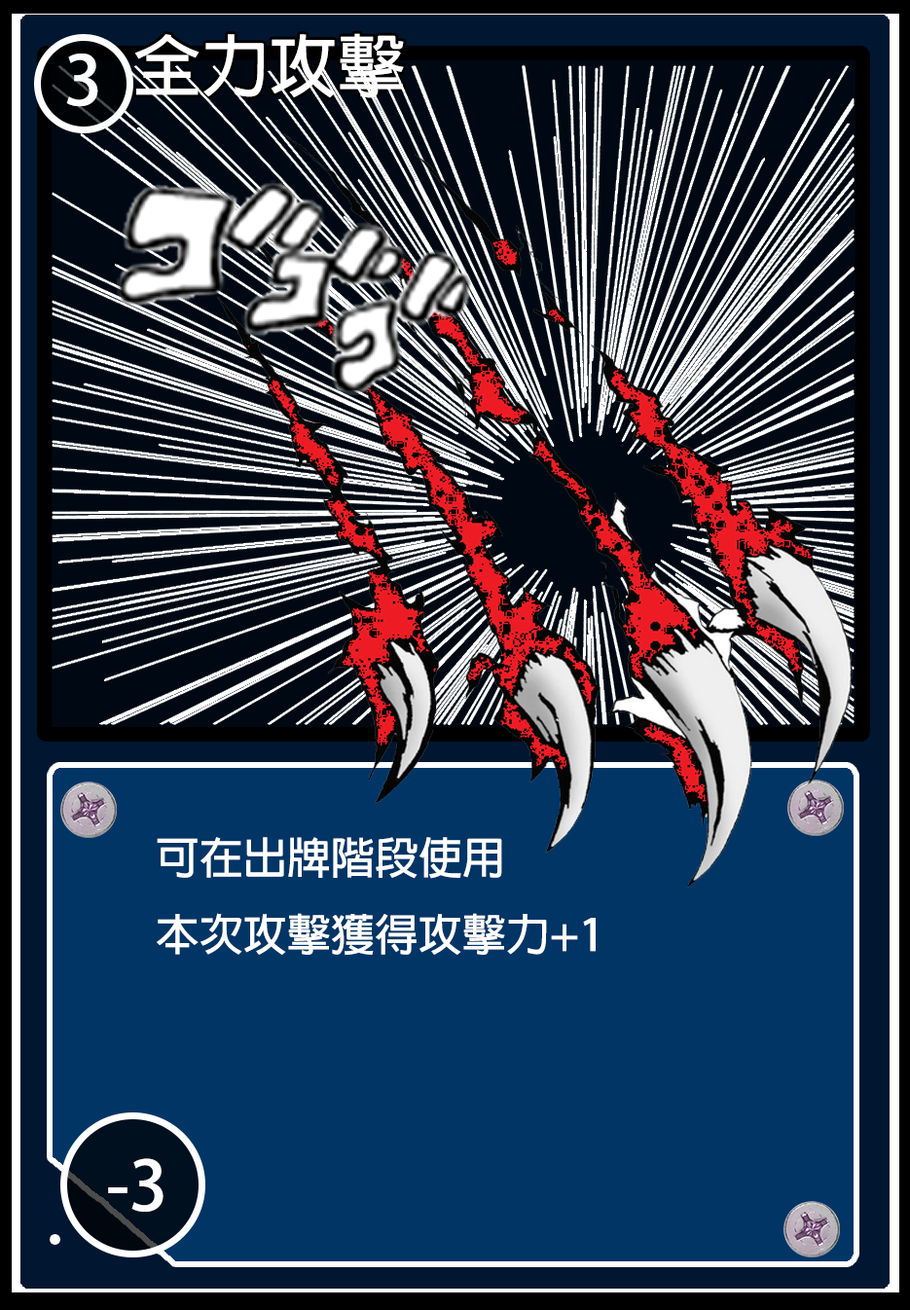
<style>
.page{position:relative;width:910px;height:1310px;background:#003566}
.page>*{position:absolute;margin:0}
.t1{font:68.1px "AdobeFanHeitiStd-Bold";color:#ffffff}
.t2{font:67.8px "AdobeFanHeitiStd-Bold";color:#ffffff}
.t3{font:43.8px "AdobeFanHeitiStd-Bold";color:#ffffff}
</style>
<div class="page">
<p class="t1" style="left:135px;top:33px;width:269px;height:65px">全力攻擊</p>
<p class="t2" style="left:66px;top:54px;width:32px;height:53px">3</p>
<p class="t3" style="left:157px;top:837px;width:439px;height:119px">可在出牌階段使用<br>本次攻擊獲得攻擊力+1</p>
<p class="t1" style="left:108px;top:1158px;width:56px;height:54px">-3</p>
</div>
